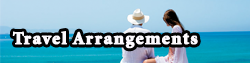
<style>
.page{position:relative;width:250px;height:63px}
.page>*{position:absolute;margin:0}
.t1{font:18px "MinionStd-Black";letter-spacing:0.05em;color:#fefbff;font-weight:bold}
</style>
<div class="page">
<p class="t1" style="left:12px;top:31px;width:186px;height:18px">Travel Arrangements</p>
</div>
